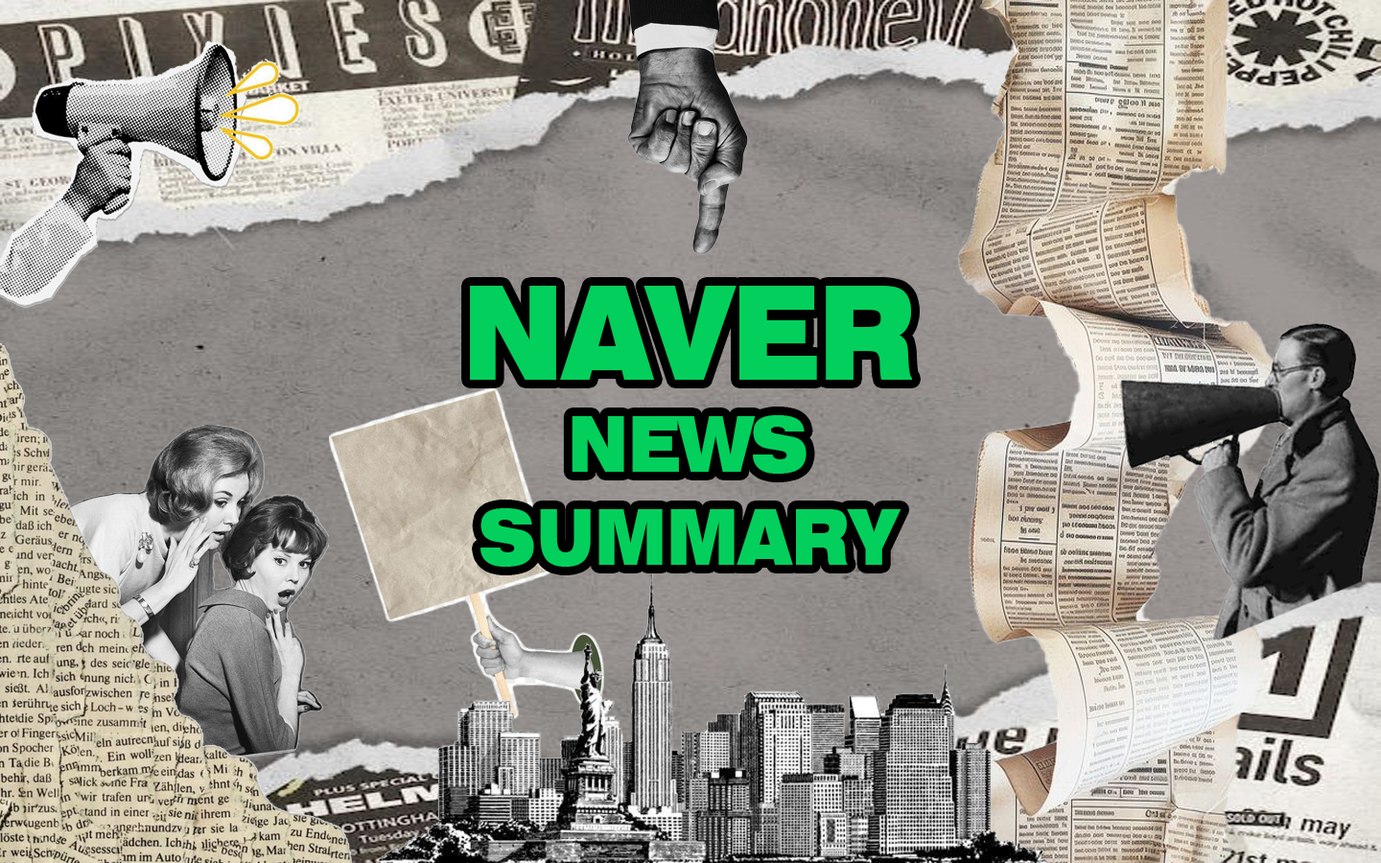
<style>
.page{position:relative;width:1381px;height:863px}
.page>*{position:absolute;margin:0}
.t1{font:77.2px "Swiss721BT-BlackExtended";color:#03cf5c;scale:0.76 1}
.t2{font:129.5px "Swiss721BT-BlackExtended";color:#03cf5c;scale:0.76 1}
</style>
<div class="page">
<p class="t1" style="left:470px;top:286px;width:442px;height:281px;text-align:center"><span class="t2">NAVER<br></span>NEWS<br>SUMMARY</p>
</div>
